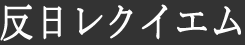
<style>
.page{position:relative;width:245px;height:45px;background:#333333}
.page>*{position:absolute;margin:0}
.t1{font:41.2px "MS-Mincho";color:#fefefe;font-weight:bold;scale:0.83 1}
</style>
<div class="page">
<p class="t1" style="left:0px;top:4px;width:241px;height:37px">反日レクイエム</p>
</div>
